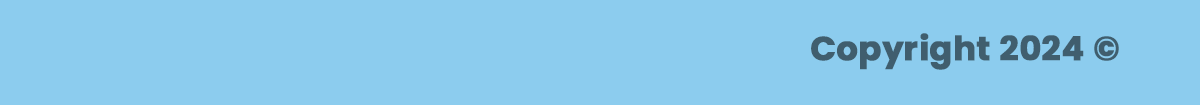
<style>
.page{position:relative;width:1200px;height:105px;background:#8cccee}
.page>*{position:absolute;margin:0}
.t1{font:33.3px "Poppins-Bold";color:#405e6e;font-weight:bold}
</style>
<div class="page">
<p class="t1" style="left:811px;top:33px;width:308px;height:37px">Copyright 2024 ©</p>
</div>
